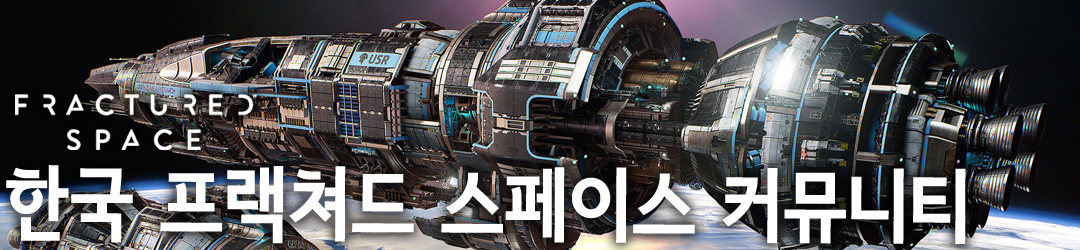
<style>
.page{position:relative;width:1080px;height:250px}
.page>*{position:absolute;margin:0}
.t1{font:78px "SeN-CBL";letter-spacing:0.02em;color:#ffffff}
</style>
<div class="page">
<p class="t1" style="left:6px;top:165px;width:960px;height:79px">한국 프랙쳐드 스페이스 커뮤니티</p>
</div>
